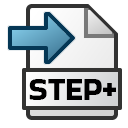
<style>
.page{position:relative;width:128px;height:128px;background:#ffffff}
.page>*{position:absolute;margin:0}
.t1{font:31.6px "BakbakOne-Regular";color:#000000}
</style>
<div class="page">
<p class="t1" style="left:29px;top:79px;width:87px;height:21px">STEP+</p>
</div>
